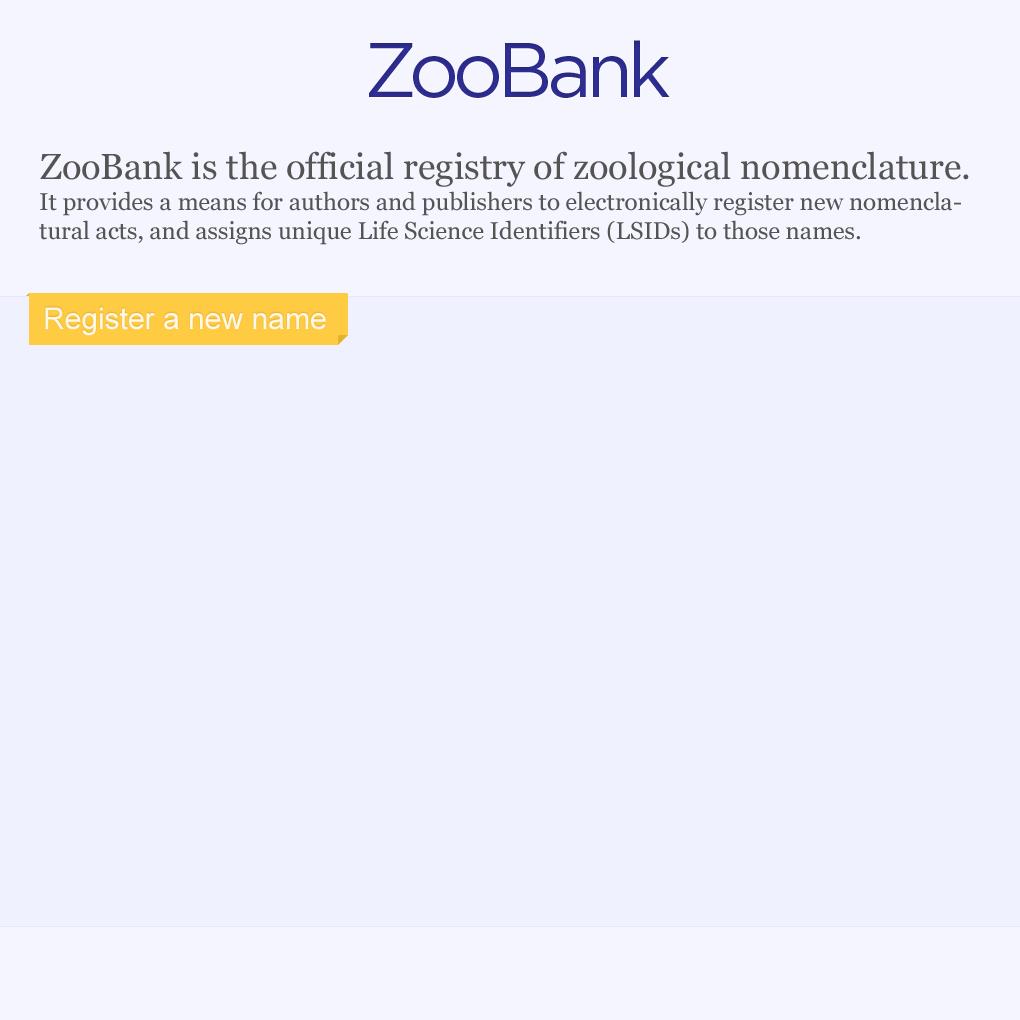
<style>
.page{position:relative;width:1020px;height:1020px;background:#f0f1ff}
.page>*{position:absolute;margin:0}
.t1{font:77px "Gotham-Book";letter-spacing:-0.06em;color:#31309c}
.t2{font:36px "Georgia";color:#545454}
.t3{font:24px "Georgia";color:#545454}
.t4{font:30px "ArialMT";color:#fff8e7}
</style>
<div class="page">
<p class="t1" style="left:369px;top:40px;width:301px;height:58px">ZooBank</p>
<p class="t2" style="left:40px;top:151px;width:929px;height:36px">ZooBank is the official registry of zoological nomenclature.</p>
<p class="t3" style="left:39px;top:191px;width:922px;height:54px">It provides a means for authors and publishers to electronically register new nomenclatural acts, and assigns unique Life Science Identifiers (LSIDs) to those names.</p>
<p class="t4" style="left:45px;top:307px;width:281px;height:29px">Register a new name</p>
</div>
